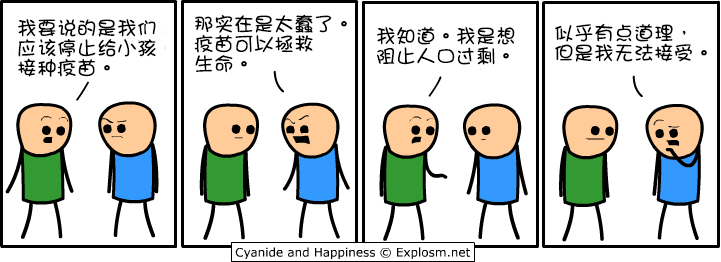
<style>
.page{position:relative;width:721px;height:262px;background:#ffffff}
.page>*{position:absolute;margin:0}
.t1{font:20px/20px "DFGirl";color:#000000}
</style>
<div class="page">
<p class="t1" style="left:194px;top:14px;width:153px;height:59px">那实在是太蠢了。<br>疫苗可以拯救<br>生命。</p>
<p class="t1" style="left:17px;top:19px;width:139px;height:58px">我要说的是我们<br>应该停止给小孩<br>接种疫苗。</p>
<p class="t1" style="left:376px;top:26px;width:139px;height:39px">我知道。我是想<br>阻止人口过剩。</p>
<p class="t1" style="left:555px;top:23px;width:152px;height:39px">似乎有点道理，<br>但是我无法接受。</p>
</div>
